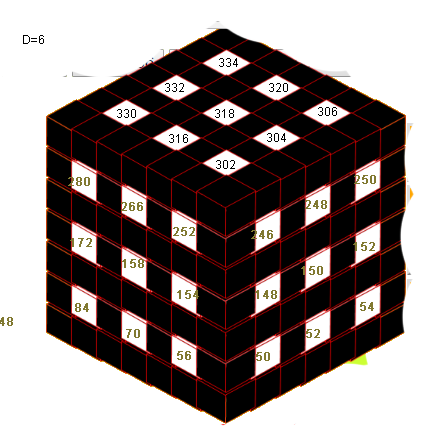
<style>
.page{position:relative;width:437px;height:446px;background:#ffffff}
.page>*{position:absolute;margin:0}
.t1{font:12px "ArialMT";color:#000000}
.t2{font:12px "ArialMT";color:#817931;font-weight:bold}
</style>
<div class="page">
<p class="t1" style="left:23px;top:35px;width:21px;height:9px">D=6</p>
<p class="t1" style="left:219px;top:58px;width:19px;height:9px">334</p>
<p class="t1" style="left:165px;top:83px;width:19px;height:9px">332</p>
<p class="t1" style="left:269px;top:83px;width:19px;height:9px">320</p>
<p class="t1" style="left:117px;top:109px;width:19px;height:9px">330</p>
<p class="t1" style="left:215px;top:109px;width:19px;height:9px">318</p>
<p class="t1" style="left:318px;top:107px;width:19px;height:9px">306</p>
<p class="t1" style="left:169px;top:134px;width:19px;height:9px">316</p>
<p class="t1" style="left:267px;top:133px;width:19px;height:9px">304</p>
<p class="t1" style="left:216px;top:160px;width:19px;height:9px">302</p>
<p class="t2" style="left:68px;top:177px;width:22px;height:9px">280</p>
<p class="t2" style="left:354px;top:175px;width:22px;height:9px">250</p>
<p class="t2" style="left:121px;top:202px;width:22px;height:9px">266</p>
<p class="t2" style="left:305px;top:200px;width:22px;height:9px">248</p>
<p class="t2" style="left:173px;top:227px;width:22px;height:9px">252</p>
<p class="t2" style="left:251px;top:230px;width:22px;height:9px">246</p>
<p class="t2" style="left:70px;top:238px;width:22px;height:9px">172</p>
<p class="t2" style="left:353px;top:242px;width:22px;height:9px">152</p>
<p class="t2" style="left:122px;top:259px;width:22px;height:9px">158</p>
<p class="t2" style="left:301px;top:266px;width:22px;height:9px">150</p>
<p class="t2" style="left:177px;top:290px;width:22px;height:9px">154</p>
<p class="t2" style="left:255px;top:290px;width:22px;height:9px">148</p>
<p class="t2" style="left:75px;top:303px;width:14px;height:9px">84</p>
<p class="t2" style="left:360px;top:302px;width:14px;height:9px">54</p>
<p class="t2" style="left:126px;top:329px;width:14px;height:9px">70</p>
<p class="t2" style="left:306px;top:329px;width:14px;height:9px">52</p>
<p class="t2" style="left:177px;top:351px;width:14px;height:9px">56</p>
<p class="t2" style="left:256px;top:352px;width:14px;height:9px">50</p>
</div>
